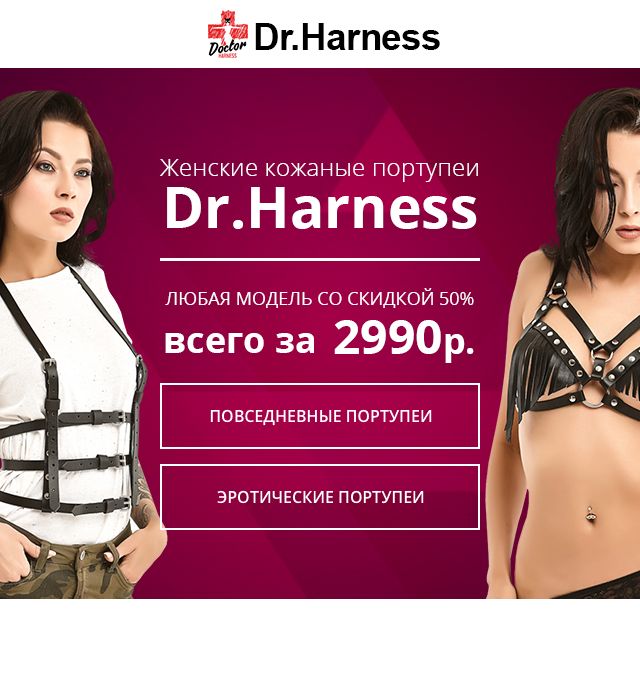
<style>
.page{position:relative;width:640px;height:674px;background:#ffffff}
.page>*{position:absolute;margin:0}
.t1{font:24px "OpenSans-Light";letter-spacing:0.01em;color:#ffffff}
.t2{font:57px "OpenSans-Bold";color:#ffffff}
.t3{font:18px "OpenSans";color:#ffffff;text-transform:uppercase}
.t4{font:48px "OpenSans-Bold";color:#ffffff}
.t5{font:36px "OpenSans-Bold";color:#ffffff}
.t6{font:16px "OpenSans-Semibold";color:#ffffff;text-transform:uppercase}
</style>
<div class="page">
<p class="t1" style="left:160px;top:159px;width:318px;height:23px">Женские кожаные портупеи</p>
<p class="t2" style="left:167px;top:187px;width:310px;height:42px">Dr.Harness</p>
<p class="t3" style="left:165px;top:288px;width:309px;height:20px">Любая модель со скидкой 50%</p>
<p class="t4" style="left:334px;top:320px;width:140px;height:43px">2990<span class="t5">р.</span></p>
<p class="t5" style="left:165px;top:333px;width:149px;height:20px">всего за</p>
<p class="t6" style="left:210px;top:409px;width:222px;height:17px">повседневные портупеи</p>
<p class="t6" style="left:217px;top:490px;width:207px;height:14px">Эротические портупеи</p>
</div>
